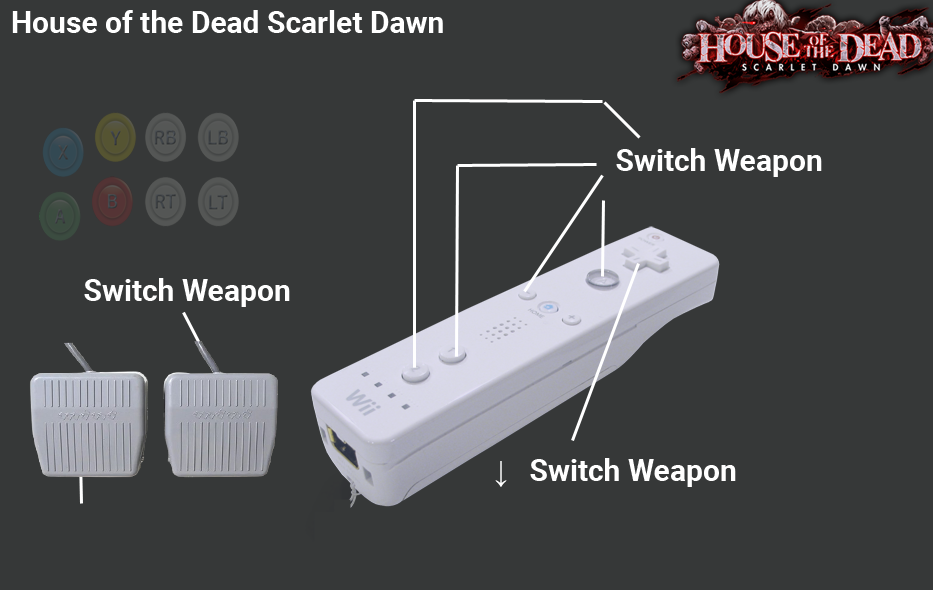
<style>
.page{position:relative;width:933px;height:590px;background:#363838}
.page>*{position:absolute;margin:0}
.t1{font:30px "Roboto-Bold";color:#ffffff}
.t2{font:30px "MicrosoftSansSerif";color:#ffffff}
</style>
<div class="page">
<p class="t1" style="left:12px;top:10px;width:431px;height:23px">House of the Dead Scarlet Dawn</p>
<p class="t1" style="left:616px;top:148px;width:206px;height:29px">Switch Weapon</p>
<p class="t1" style="left:84px;top:278px;width:206px;height:29px">Switch Weapon</p>
<p class="t1" style="left:495px;top:458px;width:241px;height:29px"><span class="t2">↓ </span>Switch Weapon</p>
</div>
